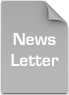
<style>
.page{position:relative;width:69px;height:95px}
.page>*{position:absolute;margin:0}
.t1{font:18px "Eurose";color:#ffffff}
</style>
<div class="page">
<p class="t1" style="left:11px;top:33px;width:48px;height:33px;text-align:center">News Letter</p>
</div>
